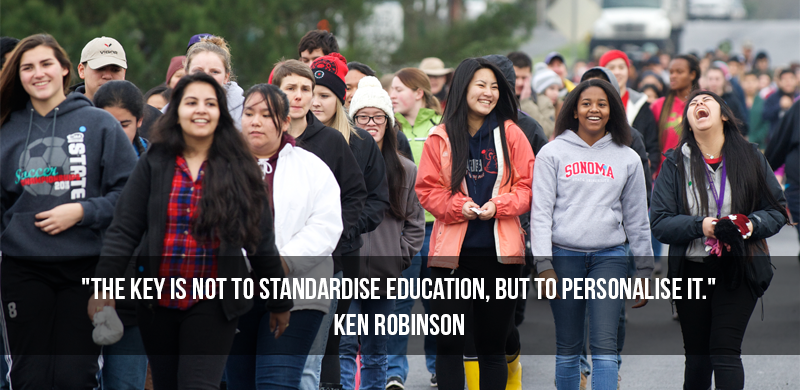
<style>
.page{position:relative;width:800px;height:390px}
.page>*{position:absolute;margin:0}
.t1{font:30px/36px "BebasNeue";color:#ffffff;text-transform:uppercase}
</style>
<div class="page">
<p class="t1" style="left:82px;top:278px;width:634px;height:57px;text-align:center">"The key is not to standardise education, but to personalise it."  <br>Ken Robinson</p>
</div>
